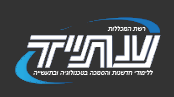
<style>
.page{position:relative;width:174px;height:97px;background:#333333}
.page>*{position:absolute;margin:0}
.t1{font:6.7px "Arial-ItalicMT";color:#ffffff}
</style>
<div class="page">
<p class="t1" style="left:107px;top:26px;width:39px;height:5px">רשת המכללות</p>
<p class="t1" style="left:33px;top:70px;width:120px;height:5px">ללימודי חדשנות והסמכה בטכנולוגיה ובתעשייה</p>
</div>
